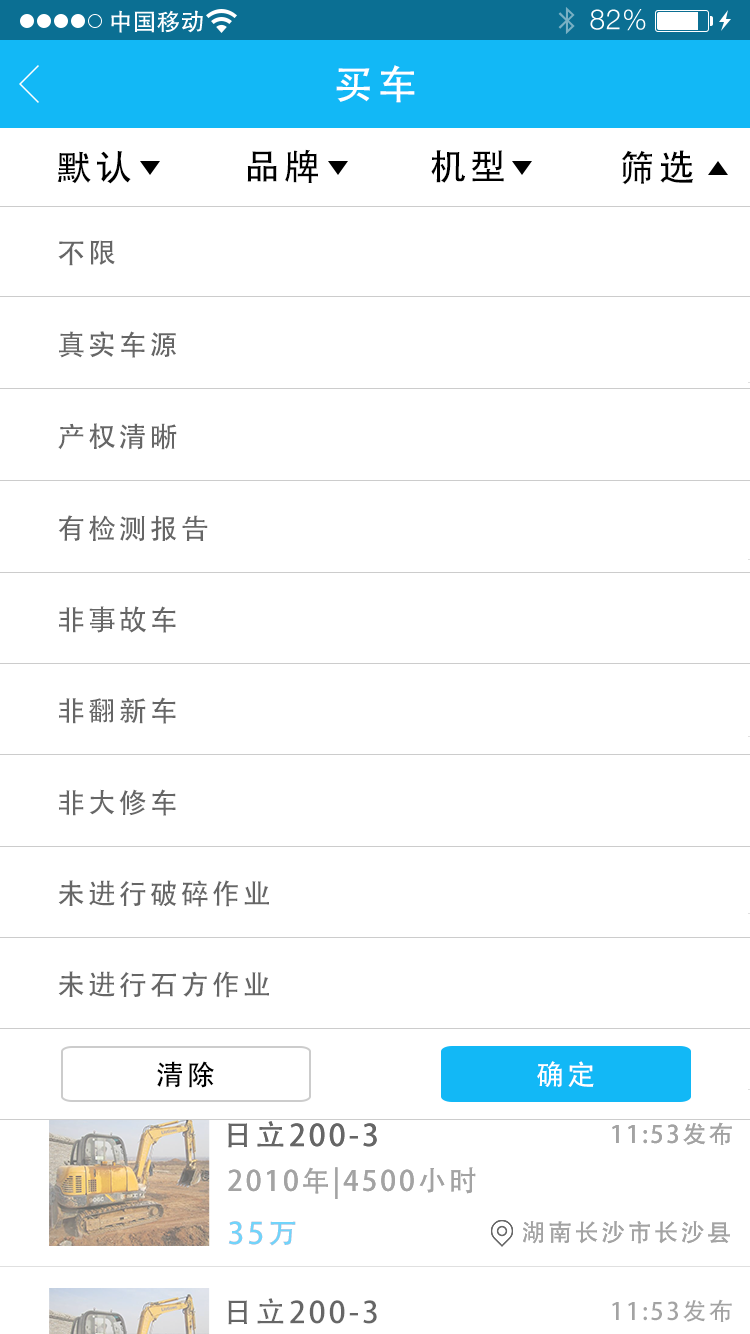
<style>
.page{position:relative;width:750px;height:1334px;background:#ffffff}
.page>*{position:absolute;margin:0}
.t1{font:40px "AdobeHeitiStd-Regular";letter-spacing:0.104em;color:#ffffff}
.t2{font:36px "AdobeHeitiStd-Regular";letter-spacing:0.104em;color:#000000}
.t3{font:28px "AdobeHeitiStd-Regular";letter-spacing:0.104em;color:#666666}
.t4{font:28px "AdobeHeitiStd-Regular";letter-spacing:0.104em;color:#000000}
.t5{font:28px "AdobeHeitiStd-Regular";letter-spacing:0.104em;color:#ffffff}
.t6{font:30px "AdobeHeitiStd-Regular";letter-spacing:0.104em;color:#666666}
.t7{font:24px "AdobeHeitiStd-Regular";letter-spacing:0.104em;color:#a3a3a3}
.t8{font:28px "AdobeHeitiStd-Regular";letter-spacing:0.104em;color:#a3a3a3}
.t9{font:30px "AdobeHeitiStd-Regular";letter-spacing:0.104em;color:#71d4fa}
</style>
<div class="page">
<p class="t1" style="left:336px;top:65px;width:79px;height:38px">买车</p>
<p class="t2" style="left:247px;top:149px;width:71px;height:34px">品牌</p>
<p class="t2" style="left:431px;top:150px;width:73px;height:33px">机型</p>
<p class="t2" style="left:621px;top:150px;width:73px;height:35px">筛选</p>
<p class="t2" style="left:57px;top:151px;width:74px;height:33px">默认</p>
<p class="t3" style="left:58px;top:240px;width:57px;height:26px">不限</p>
<p class="t3" style="left:59px;top:331px;width:117px;height:27px">真实车源</p>
<p class="t3" style="left:58px;top:423px;width:119px;height:27px">产权清晰</p>
<p class="t3" style="left:58px;top:515px;width:150px;height:27px">有检测报告</p>
<p class="t3" style="left:59px;top:606px;width:117px;height:27px">非事故车</p>
<p class="t3" style="left:59px;top:697px;width:117px;height:27px">非翻新车</p>
<p class="t3" style="left:59px;top:789px;width:117px;height:27px">非大修车</p>
<p class="t3" style="left:58px;top:880px;width:211px;height:27px">未进行破碎作业</p>
<p class="t3" style="left:58px;top:971px;width:211px;height:27px">未进行石方作业</p>
<p class="t4" style="left:157px;top:1061px;width:57px;height:27px">清除</p>
<p class="t5" style="left:537px;top:1061px;width:57px;height:26px">确定</p>
<p class="t6" style="left:228px;top:1121px;width:149px;height:27px">日立200-3</p>
<p class="t6" style="left:228px;top:1121px;width:149px;height:27px">日立200-3</p>
<p class="t7" style="left:612px;top:1122px;width:120px;height:23px">11:53发布</p>
<p class="t7" style="left:612px;top:1122px;width:120px;height:23px">11:53发布</p>
<p class="t8" style="left:228px;top:1167px;width:248px;height:32px">2010年|4500小时</p>
<p class="t8" style="left:228px;top:1167px;width:248px;height:32px">2010年|4500小时</p>
<p class="t9" style="left:228px;top:1221px;width:68px;height:25px">35万</p>
<p class="t9" style="left:228px;top:1221px;width:68px;height:25px">35万</p>
<p class="t7" style="left:523px;top:1221px;width:207px;height:23px">湖南长沙市长沙县</p>
<p class="t7" style="left:523px;top:1221px;width:207px;height:23px">湖南长沙市长沙县</p>
<p class="t6" style="left:228px;top:1298px;width:149px;height:27px">日立200-3</p>
<p class="t7" style="left:612px;top:1299px;width:120px;height:23px">11:53发布</p>
</div>
